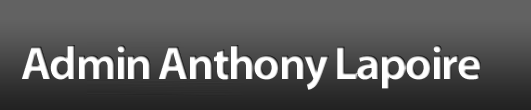
<style>
.page{position:relative;width:531px;height:110px}
.page>*{position:absolute;margin:0}
.t1{font:48px "MyriadPro-Bold";letter-spacing:-0.05em;color:#ffffff}
</style>
<div class="page">
<p class="t1" style="left:21px;top:45px;width:460px;height:45px">Admin Anthony Lapoire</p>
</div>
